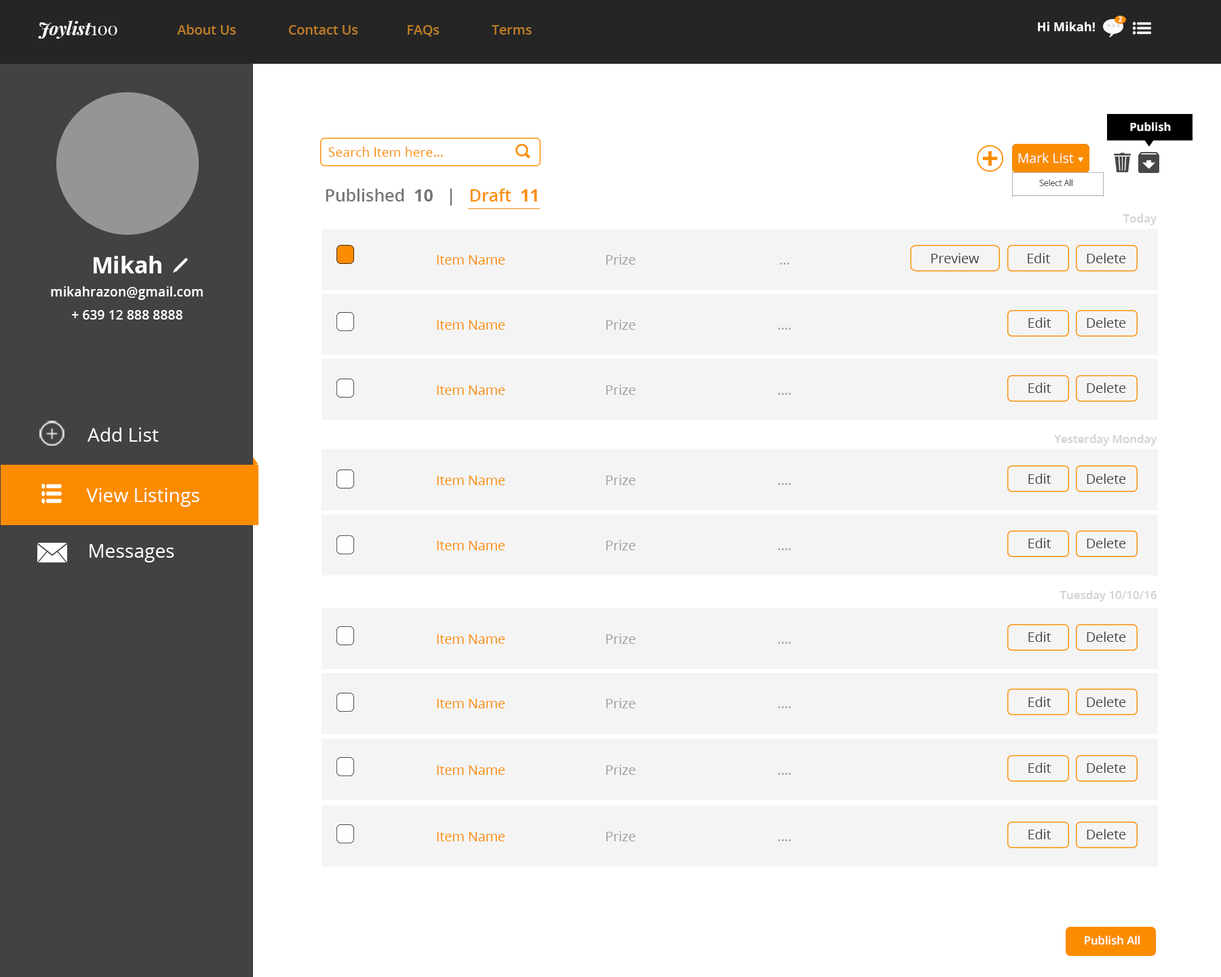
<style>
.page{position:relative;width:1221px;height:977px;background:#f4f4f4}
.page>*{position:absolute;margin:0}
.t1{font:7.1px "OpenSans-Bold";color:#fffefe}
.t2{font:17.5px "PlayfairDisplay-BoldItalic";color:#ffffff}
.t3{font:17.5px "PlayfairDisplay-Regular";color:#ffffff}
.t4{font:13.4px "OpenSans-Semibold";color:#bd7d26}
.t5{font:12.3px "OpenSans-Bold";color:#ffffff}
.t6{font:11.3px "OpenSans-Bold";color:#ffffff}
.t7{font:13.2px "OpenSans";color:#fb8c00}
.t8{font:13.2px "OpenSans";color:#fcfafa}
.t9{font:8.5px "OpenSans-Light";color:#474747}
.t10{font:17px "OpenSans-Semibold";color:#757373}
.t11{font:17px "OpenSans-Bold";color:#757373}
.t12{font:17px "OpenSans-Semibold";color:#fb8c00}
.t13{font:17px "OpenSans-Bold";color:#fb8c00}
.t14{font:11.4px "OpenSans-Semibold";color:#d2d2d2}
.t15{font:22.9px "OpenSans-Bold";color:#ffffff}
.t16{font:13.4px "OpenSans";color:#fb8c00}
.t17{font:13.4px "OpenSans";color:#9e9e9e}
.t18{font:13.4px "OpenSans";color:#424242}
.t19{font:13.2px "OpenSans-Semibold";color:#ffffff}
.t20{font:19.1px "OpenSans";color:#ffffff}
.t21{font:11.3px "OpenSans-Semibold";color:#ffffff}
</style>
<div class="page">
<p class="t1" style="left:1118px;top:16px;width:5px;height:6px">2</p>
<p class="t2" style="left:38px;top:20px;width:79px;height:19px;text-align:justify">Joylist<span class="t3">100<br></span>t<span class="t3">100</span></p>
<p class="t4" style="left:177px;top:24px;width:355px;height:13px">About Us               Contact Us              FAQs               Terms</p>
<p class="t5" style="left:1038px;top:22px;width:57px;height:10px">Hi Mikah!</p>
<p class="t6" style="left:1130px;top:122px;width:41px;height:10px">Publish</p>
<p class="t7" style="left:328px;top:147px;width:115px;height:10px">Search Item here...</p>
<p class="t8" style="left:1018px;top:153px;width:56px;height:10px">Mark List</p>
<p class="t9" style="left:1039px;top:179px;width:33px;height:8px">Select All</p>
<p class="t10" style="left:326px;top:189px;width:211px;height:17px">Published  <span class="t11">10   </span>|   <span class="t12">Draft  </span><span class="t13">11</span></p>
<p class="t14" style="left:1123px;top:214px;width:33px;height:11px">Today</p>
<p class="t15" style="left:94px;top:256px;width:67px;height:17px">Mikah</p>
<p class="t16" style="left:437px;top:255px;width:68px;height:10px">Item Name</p>
<p class="t17" style="left:606px;top:254px;width:30px;height:11px">Prize</p>
<p class="t18" style="left:931px;top:253px;width:48px;height:10px">Preview</p>
<p class="t18" style="left:1028px;top:253px;width:22px;height:10px">Edit</p>
<p class="t18" style="left:1087px;top:253px;width:39px;height:10px">Delete</p>
<p class="t17" style="left:780px;top:262px;width:10px;height:3px">...</p>
<p class="t19" style="left:51px;top:286px;width:152px;height:14px">mikahrazon@gmail.com</p>
<p class="t19" style="left:72px;top:310px;width:110px;height:9px">+ 639 12 888 8888</p>
<p class="t18" style="left:1028px;top:317px;width:23px;height:11px">Edit</p>
<p class="t18" style="left:1087px;top:317px;width:39px;height:11px">Delete</p>
<p class="t16" style="left:437px;top:320px;width:68px;height:10px">Item Name</p>
<p class="t17" style="left:606px;top:319px;width:30px;height:11px">Prize</p>
<p class="t17" style="left:778px;top:328px;width:13px;height:2px">....</p>
<p class="t16" style="left:437px;top:385px;width:68px;height:10px">Item Name</p>
<p class="t17" style="left:606px;top:385px;width:30px;height:10px">Prize</p>
<p class="t18" style="left:1028px;top:383px;width:23px;height:10px">Edit</p>
<p class="t18" style="left:1087px;top:383px;width:39px;height:10px">Delete</p>
<p class="t17" style="left:778px;top:393px;width:13px;height:2px">....</p>
<p class="t20" style="left:87px;top:427px;width:72px;height:15px">Add List</p>
<p class="t14" style="left:1054px;top:434px;width:103px;height:12px">Yesterday Monday</p>
<p class="t18" style="left:1028px;top:473px;width:23px;height:11px">Edit</p>
<p class="t18" style="left:1087px;top:473px;width:39px;height:11px">Delete</p>
<p class="t16" style="left:437px;top:475px;width:68px;height:10px">Item Name</p>
<p class="t17" style="left:606px;top:475px;width:30px;height:10px">Prize</p>
<p class="t17" style="left:778px;top:483px;width:13px;height:2px">....</p>
<p class="t20" style="left:86px;top:488px;width:113px;height:19px">View Listings</p>
<p class="t20" style="left:90px;top:544px;width:84px;height:18px">Messages</p>
<p class="t16" style="left:437px;top:541px;width:68px;height:9px">Item Name</p>
<p class="t17" style="left:606px;top:540px;width:30px;height:10px">Prize</p>
<p class="t18" style="left:1028px;top:538px;width:23px;height:10px">Edit</p>
<p class="t18" style="left:1087px;top:538px;width:39px;height:10px">Delete</p>
<p class="t17" style="left:778px;top:548px;width:13px;height:2px">....</p>
<p class="t14" style="left:1059px;top:590px;width:97px;height:12px">Tuesday 10/10/16</p>
<p class="t16" style="left:437px;top:634px;width:68px;height:10px">Item Name</p>
<p class="t17" style="left:606px;top:633px;width:30px;height:11px">Prize</p>
<p class="t17" style="left:778px;top:642px;width:13px;height:2px">....</p>
<p class="t18" style="left:1028px;top:631px;width:23px;height:11px">Edit</p>
<p class="t18" style="left:1087px;top:631px;width:39px;height:11px">Delete</p>
<p class="t16" style="left:437px;top:699px;width:68px;height:9px">Item Name</p>
<p class="t17" style="left:606px;top:698px;width:30px;height:10px">Prize</p>
<p class="t18" style="left:1028px;top:697px;width:23px;height:10px">Edit</p>
<p class="t18" style="left:1087px;top:697px;width:39px;height:10px">Delete</p>
<p class="t17" style="left:778px;top:706px;width:13px;height:2px">....</p>
<p class="t16" style="left:437px;top:765px;width:68px;height:10px">Item Name</p>
<p class="t17" style="left:606px;top:764px;width:30px;height:11px">Prize</p>
<p class="t17" style="left:778px;top:773px;width:13px;height:2px">....</p>
<p class="t18" style="left:1028px;top:762px;width:23px;height:11px">Edit</p>
<p class="t18" style="left:1087px;top:762px;width:39px;height:11px">Delete</p>
<p class="t16" style="left:437px;top:832px;width:68px;height:9px">Item Name</p>
<p class="t17" style="left:606px;top:831px;width:30px;height:10px">Prize</p>
<p class="t18" style="left:1028px;top:829px;width:23px;height:10px">Edit</p>
<p class="t18" style="left:1087px;top:829px;width:39px;height:10px">Delete</p>
<p class="t17" style="left:778px;top:839px;width:13px;height:2px">....</p>
<p class="t21" style="left:1085px;top:935px;width:55px;height:10px">Publish All</p>
</div>
